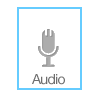
<style>
.page{position:relative;width:100px;height:100px;background:#ffffff}
.page>*{position:absolute;margin:0}
.t1{font:24px "HelveticaNeue";letter-spacing:-0.05em;color:#6e6e6e}
</style>
<div class="page">
<p class="t1" style="left:32px;top:74px;width:33px;height:11px">Audio</p>
</div>
